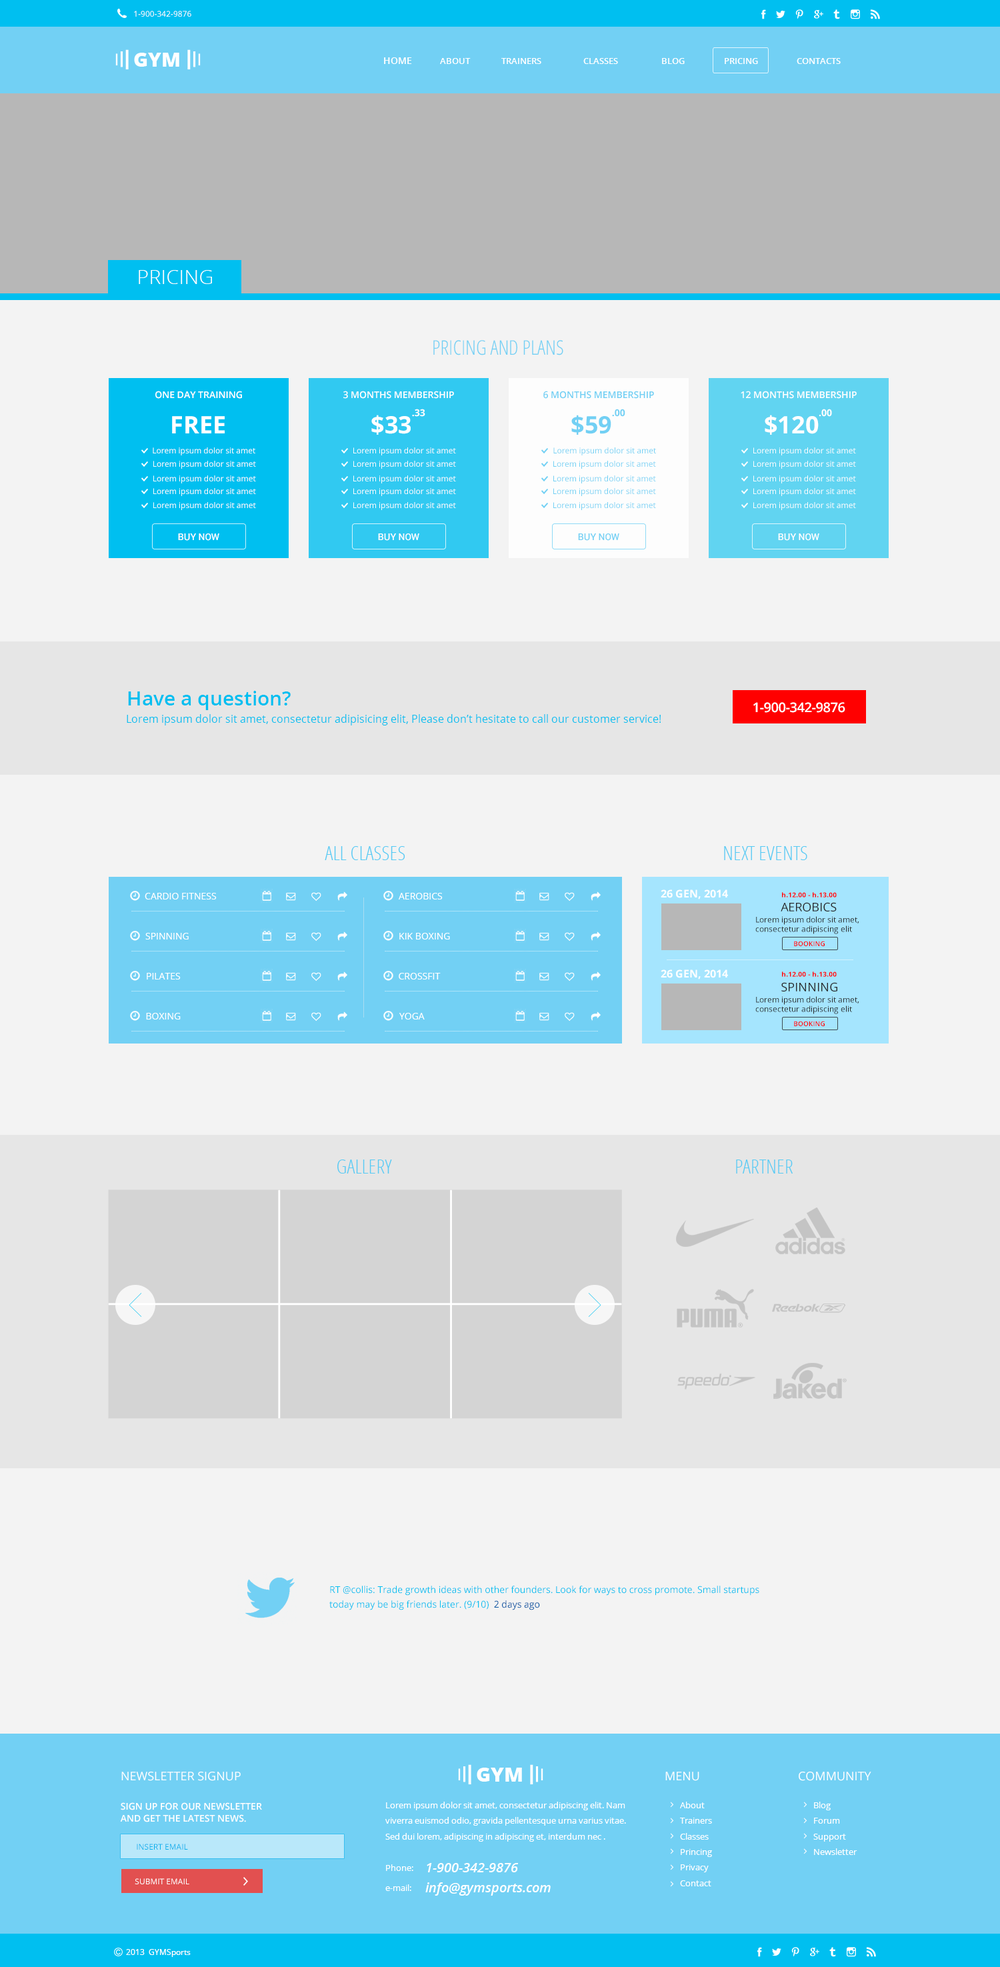
<style>
.page{position:relative;width:1000px;height:1967px;background:#f3f3f3}
.page>*{position:absolute;margin:0}
.t1{font:8px "OpenSans";color:#ffffff;text-transform:uppercase}
.t2{font:9.3px "OpenSans-Semibold";color:#ffffff}
.t3{font:8.7px "OpenSans-Semibold";color:#ffffff}
.t4{font:8.7px "OpenSans-Semibold";color:#feffff}
.t5{font:20px "OpenSans-Light";color:#feffff}
.t6{font:20px "OpenSans-CondensedLight";color:#72d0f4;text-transform:uppercase}
.t7{font:9.3px "OpenSans-Semibold";color:#ffffff;text-transform:uppercase}
.t8{font:9.3px "OpenSans-Semibold";color:#72d0f4;text-transform:uppercase}
.t9{font:24px "OpenSans-Bold";color:#ffffff;text-transform:uppercase}
.t10{font:16px "OpenSans-Bold";color:#ffffff;font-variant:small-caps}
.t11{font:24px "OpenSans-Bold";color:#72d0f4;text-transform:uppercase}
.t12{font:16px "OpenSans-Bold";color:#72d0f4;font-variant:small-caps}
.t13{font:8px "OpenSans";color:#ffffff}
.t14{font:8px "OpenSans";color:#72d0f4}
.t15{font:9.3px "Roboto-Medium";color:#ffffff}
.t16{font:9.3px "Roboto-Medium";color:#72d0f4}
.t17{font:20px "OpenSans-Semibold";color:#00bff0}
.t18{font:13.3px "OpenSans-Semibold";color:#ffffff}
.t19{font:10.7px "OpenSans";color:#00bff0}
.t20{font:20px "OpenSans-CondensedLight";color:#57cbf4}
.t21{font:9.3px "OpenSans";color:#ffffff;text-transform:uppercase}
.t22{font:10.7px "OpenSans-Bold";color:#ffffff;text-transform:uppercase}
.t23{font:6.7px "OpenSans-Bold";color:#fe0000}
.t24{font:12px "OpenSans";color:#292929;text-transform:uppercase}
.t25{font:8px/9.3px "OpenSans";color:#252525}
.t26{font:6.7px "OpenSans-Semibold";color:#ff0000;text-transform:uppercase}
.t27{font:6.7px "OpenSans-Semibold";color:#fe0000;text-transform:uppercase}
.t28{font:9.3px/14.7px "OpenSans";color:#00bff0}
.t29{font:9.3px/14.7px "OpenSans";color:#0056a4}
.t30{font:12px "OpenSans";color:#ffffff;text-transform:uppercase}
.t31{font:9.3px/12px "OpenSans-Semibold";color:#ffffff;text-transform:uppercase}
.t32{font:8.7px/15.6px "OpenSans";color:#ffffff}
.t33{font:8px "OpenSans";color:#00afec;text-transform:uppercase}
.t34{font:8.7px "OpenSans";color:#ffffff}
.t35{font:13.3px "OpenSans-SemiboldItalic";color:#ffffff}
</style>
<div class="page">
<p class="t1" style="left:134px;top:11px;width:57px;height:6px">1-900-342-9876</p>
<p class="t2" style="left:384px;top:57px;width:28px;height:7px">HOME</p>
<p class="t3" style="left:440px;top:58px;width:31px;height:6px">ABOUT</p>
<p class="t3" style="left:501px;top:58px;width:40px;height:6px">TRAINERS</p>
<p class="t4" style="left:583px;top:58px;width:35px;height:6px">CLASSES</p>
<p class="t3" style="left:662px;top:58px;width:23px;height:6px">BLOG</p>
<p class="t3" style="left:725px;top:58px;width:33px;height:6px">PRICING</p>
<p class="t3" style="left:797px;top:58px;width:44px;height:6px">CONTACTS</p>
<p class="t5" style="left:139px;top:270px;width:73px;height:14px">PRICING</p>
<p class="t6" style="left:433px;top:340px;width:130px;height:15px">PRicing and plans</p>
<p class="t7" style="left:155px;top:391px;width:87px;height:8px">ONE DAY TRAINING</p>
<p class="t7" style="left:343px;top:391px;width:111px;height:8px">3 MONTHS MEMBERSHIP</p>
<p class="t8" style="left:543px;top:391px;width:111px;height:8px">6 MONTHS MEMBERSHIP</p>
<p class="t7" style="left:741px;top:391px;width:116px;height:8px">12 MONTHS MEMBERSHIP</p>
<p class="t9" style="left:371px;top:409px;width:54px;height:26px">$33<span class="t10">.33</span></p>
<p class="t11" style="left:571px;top:409px;width:54px;height:26px">$59<span class="t12">.00</span></p>
<p class="t9" style="left:765px;top:409px;width:67px;height:26px">$120<span class="t10">.00</span></p>
<p class="t9" style="left:172px;top:416px;width:53px;height:17px">Free</p>
<p class="t13" style="left:153px;top:447px;width:102px;height:8px">Lorem ipsum dolor sit amet</p>
<p class="t13" style="left:353px;top:447px;width:103px;height:8px">Lorem ipsum dolor sit amet</p>
<p class="t14" style="left:553px;top:447px;width:103px;height:8px">Lorem ipsum dolor sit amet</p>
<p class="t13" style="left:753px;top:447px;width:103px;height:8px">Lorem ipsum dolor sit amet</p>
<p class="t13" style="left:153px;top:461px;width:103px;height:8px">Lorem ipsum dolor sit amet</p>
<p class="t13" style="left:353px;top:461px;width:103px;height:8px">Lorem ipsum dolor sit amet</p>
<p class="t14" style="left:553px;top:461px;width:103px;height:8px">Lorem ipsum dolor sit amet</p>
<p class="t13" style="left:753px;top:461px;width:103px;height:8px">Lorem ipsum dolor sit amet</p>
<p class="t13" style="left:153px;top:475px;width:103px;height:8px">Lorem ipsum dolor sit amet</p>
<p class="t13" style="left:353px;top:475px;width:103px;height:8px">Lorem ipsum dolor sit amet</p>
<p class="t14" style="left:553px;top:475px;width:103px;height:8px">Lorem ipsum dolor sit amet</p>
<p class="t13" style="left:753px;top:475px;width:103px;height:8px">Lorem ipsum dolor sit amet</p>
<p class="t13" style="left:153px;top:488px;width:103px;height:8px">Lorem ipsum dolor sit amet</p>
<p class="t13" style="left:353px;top:488px;width:103px;height:8px">Lorem ipsum dolor sit amet</p>
<p class="t14" style="left:553px;top:488px;width:103px;height:8px">Lorem ipsum dolor sit amet</p>
<p class="t13" style="left:753px;top:488px;width:103px;height:8px">Lorem ipsum dolor sit amet</p>
<p class="t13" style="left:153px;top:502px;width:103px;height:8px">Lorem ipsum dolor sit amet</p>
<p class="t13" style="left:353px;top:502px;width:103px;height:8px">Lorem ipsum dolor sit amet</p>
<p class="t14" style="left:553px;top:502px;width:103px;height:8px">Lorem ipsum dolor sit amet</p>
<p class="t13" style="left:753px;top:502px;width:103px;height:8px">Lorem ipsum dolor sit amet</p>
<p class="t15" style="left:178px;top:533px;width:41px;height:8px">BUY NOW</p>
<p class="t15" style="left:378px;top:533px;width:41px;height:8px">BUY NOW</p>
<p class="t16" style="left:578px;top:533px;width:41px;height:8px">BUY NOW</p>
<p class="t15" style="left:778px;top:533px;width:41px;height:8px">BUY NOW</p>
<p class="t17" style="left:128px;top:691px;width:163px;height:19px">Have a question?</p>
<p class="t18" style="left:753px;top:702px;width:92px;height:11px">1-900-342-9876</p>
<p class="t19" style="left:127px;top:714px;width:534px;height:11px">Lorem ipsum dolor sit amet, consectetur adipisicing elit, Please don’t hesitate to call our customer service!</p>
<p class="t20" style="left:325px;top:846px;width:80px;height:14px">ALL CLASSES</p>
<p class="t20" style="left:724px;top:846px;width:83px;height:14px">NEXT EVENTS</p>
<p class="t21" style="left:145px;top:893px;width:72px;height:6px">cardio fitness</p>
<p class="t21" style="left:399px;top:893px;width:44px;height:6px">Aerobics</p>
<p class="t22" style="left:661px;top:889px;width:67px;height:10px">26 Gen, 2014</p>
<p class="t23" style="left:782px;top:892px;width:55px;height:5px">h.12.00 - h.13.00</p>
<p class="t24" style="left:781px;top:902px;width:56px;height:9px">AEROBICS</p>
<p class="t25" style="left:755px;top:916px;width:104px;height:18px">Lorem ipsum dolor sit amet, consectetur adipiscing elit</p>
<p class="t21" style="left:145px;top:933px;width:44px;height:6px">SPINNING</p>
<p class="t21" style="left:399px;top:933px;width:51px;height:6px">kik boxing</p>
<p class="t26" style="left:794px;top:941px;width:31px;height:5px">BOOKING</p>
<p class="t21" style="left:147px;top:973px;width:34px;height:6px">PILATES</p>
<p class="t21" style="left:399px;top:973px;width:42px;height:6px">Crossfit</p>
<p class="t22" style="left:661px;top:969px;width:67px;height:10px">26 Gen, 2014</p>
<p class="t23" style="left:782px;top:971px;width:55px;height:6px">h.12.00 - h.13.00</p>
<p class="t24" style="left:781px;top:982px;width:56px;height:9px">SPINNING</p>
<p class="t25" style="left:755px;top:996px;width:104px;height:18px">Lorem ipsum dolor sit amet, consectetur adipiscing elit</p>
<p class="t21" style="left:146px;top:1013px;width:35px;height:6px">BOXING</p>
<p class="t21" style="left:399px;top:1013px;width:26px;height:6px">yoga</p>
<p class="t27" style="left:794px;top:1021px;width:31px;height:5px">booking</p>
<p class="t20" style="left:337px;top:1159px;width:55px;height:14px">GALLERY</p>
<p class="t20" style="left:736px;top:1159px;width:57px;height:14px">PARTNER</p>
<p class="t28" style="left:329px;top:1585px;width:430px;height:25px">RT @collis: Trade growth ideas with other founders. Look for ways to cross promote. Small startups <br>today may be big friends later. (9/10)  <span class="t29">2 days ago</span></p>
<p class="t30" style="left:121px;top:1771px;width:120px;height:10px">NEWSLETTER SIGNUP</p>
<p class="t30" style="left:665px;top:1771px;width:34px;height:10px">MENU</p>
<p class="t30" style="left:799px;top:1771px;width:72px;height:10px">COMMUNITY</p>
<p class="t31" style="left:120px;top:1802px;width:142px;height:20px">Sign up for our newsletter <br>and get the latest news.</p>
<p class="t32" style="left:385px;top:1801px;width:241px;height:40px">Lorem ipsum dolor sit amet, consectetur adipiscing elit. Nam viverra euismod odio, gravida pellentesque urna varius vitae. Sed dui lorem, adipiscing in adipiscing et, interdum nec .</p>
<p class="t32" style="left:680px;top:1801px;width:32px;height:85px">About<br>Trainers<br>Classes<br>Princing<br>Privacy<br>Contact</p>
<p class="t32" style="left:813px;top:1801px;width:44px;height:54px">Blog<br>Forum<br>Support<br>Newsletter</p>
<p class="t33" style="left:137px;top:1843px;width:51px;height:6px">insert email</p>
<p class="t34" style="left:386px;top:1864px;width:27px;height:7px">Phone:</p>
<p class="t35" style="left:427px;top:1863px;width:92px;height:9px">1-900-342-9876</p>
<p class="t1" style="left:135px;top:1878px;width:54px;height:6px">Submit email</p>
<p class="t34" style="left:385px;top:1884px;width:26px;height:7px">e-mail:</p>
<p class="t35" style="left:425px;top:1882px;width:126px;height:13px">info@gymsports.com</p>
<p class="t13" style="left:126px;top:1949px;width:65px;height:8px">2013  GYMSports</p>
</div>
